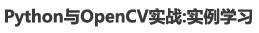
<style>
.page{position:relative;width:259px;height:33px;background:#ffffff}
.page>*{position:absolute;margin:0}
.t1{font:16.7px "MicrosoftYaHei-Bold";color:#393a3a}
</style>
<div class="page">
<p class="t1" style="left:5px;top:8px;width:247px;height:19px">Python与OpenCV实战:实例学习</p>
</div>
